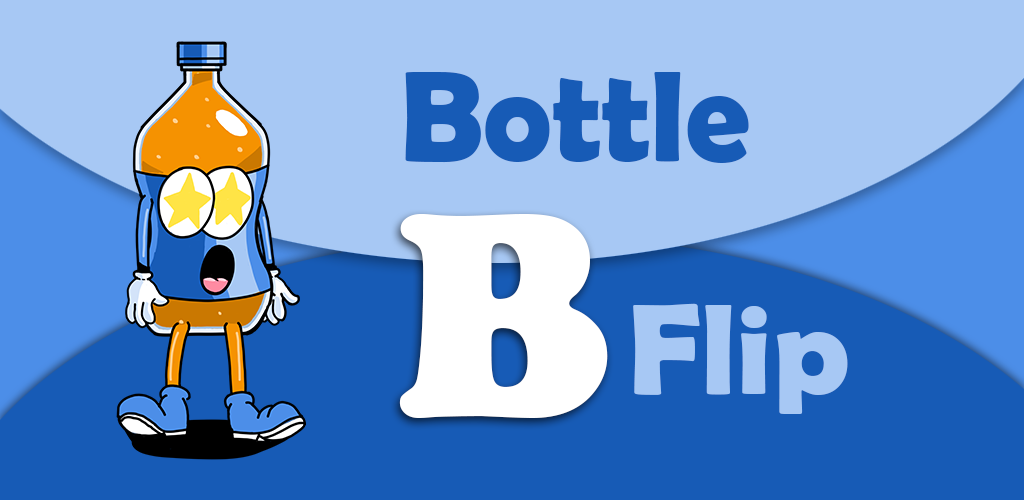
<style>
.page{position:relative;width:1024px;height:500px;background:#a7c8f4}
.page>*{position:absolute;margin:0}
.t1{font:130px "BerlinSansFBDemi-Bold";color:#175bb6}
.t2{font:300px "CooperBlack";color:#ffffff}
.t3{font:130px "BerlinSansFBDemi-Bold";color:#a7c8f4}
</style>
<div class="page">
<p class="t1" style="left:405px;top:72px;width:344px;height:91px">Bottle</p>
<p class="t2" style="left:399px;top:214px;width:209px;height:204px">B</p>
<p class="t3" style="left:633px;top:303px;width:215px;height:111px">Flip</p>
</div>
